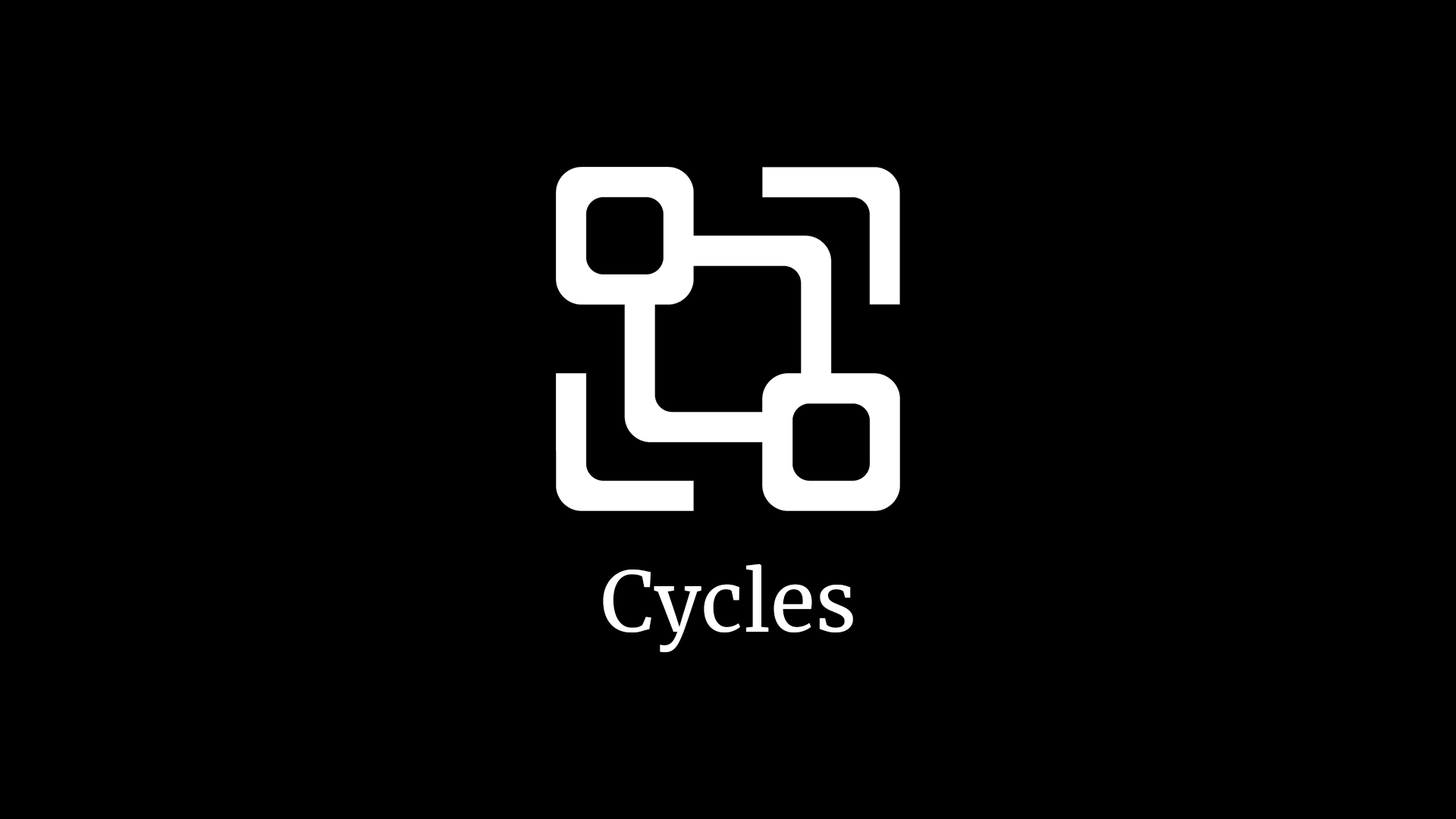
<style>
.page{position:relative;width:1456px;height:819px;background:#000000}
.page>*{position:absolute;margin:0}
.t1{font:81.9px "Merriweather-Regular";color:#ffffff}
</style>
<div class="page">
<p class="t1" style="left:603px;top:563px;width:250px;height:89px">Cycles</p>
</div>
